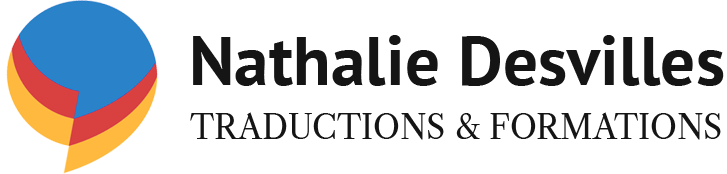
<style>
.page{position:relative;width:727px;height:174px;background:#ffffff}
.page>*{position:absolute;margin:0}
.t1{font:68.8px "PTSans-Bold";letter-spacing:0.005em;color:#151515}
.t2{font:32.2px "LibreCaslonText-Regular";color:#151515}
</style>
<div class="page">
<p class="t1" style="left:193px;top:35px;width:531px;height:51px">Nathalie Desvilles</p>
<p class="t2" style="left:190px;top:112px;width:531px;height:28px">TRADUCTIONS &amp; FORMATIONS</p>
</div>
